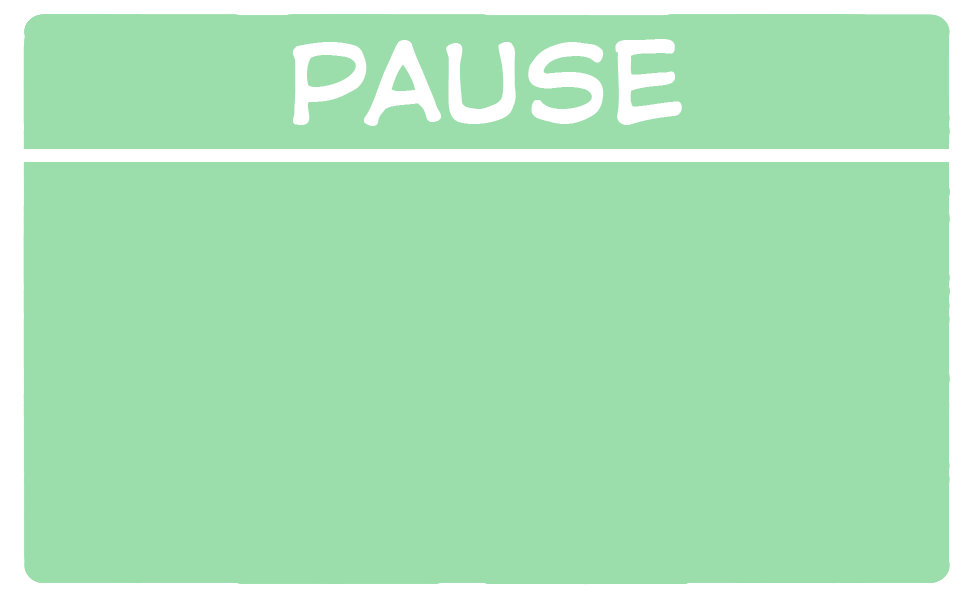
<style>
.page{position:relative;width:975px;height:600px;background:#9bdeac}
.page>*{position:absolute;margin:0}
.t1{font:100px "CCAstroCity";letter-spacing:0.025em;color:#ffffff}
</style>
<div class="page">
<p class="t1" style="left:292px;top:39px;width:390px;height:87px">Pause</p>
</div>
